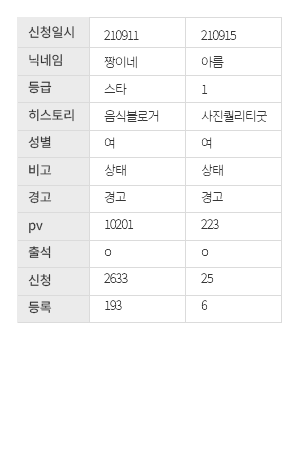
<style>
.page{position:relative;width:300px;height:466px;background:#ffffff}
.page>*{position:absolute;margin:0}
.t1{font:13px/27.5px "NotoSansKR-Regular";letter-spacing:-0.02em;color:#363636}
.t2{font:13px/27px "NotoSansKR-Thin";letter-spacing:-0.08em;color:#363636}
</style>
<div class="page">
<p class="t1" style="left:28px;top:26px;width:46px;height:288px">신청일시<br>닉네임<br>등급<br>히스토리<br>성별<br>비고<br>경고<br>pv<br>출석<br>신청<br>등록</p>
<p class="t2" style="left:104px;top:30px;width:55px;height:280px">210911<br>짱이네<br>스타<br>음식블로거<br>여<br>상태<br>경고<br>10201<br>o<br>2633<br>193</p>
<p class="t2" style="left:201px;top:30px;width:66px;height:280px">210915<br>아름<br>1<br>사진퀄리티굿<br>여<br>상태<br>경고<br>223<br>o<br>25<br>6</p>
</div>
